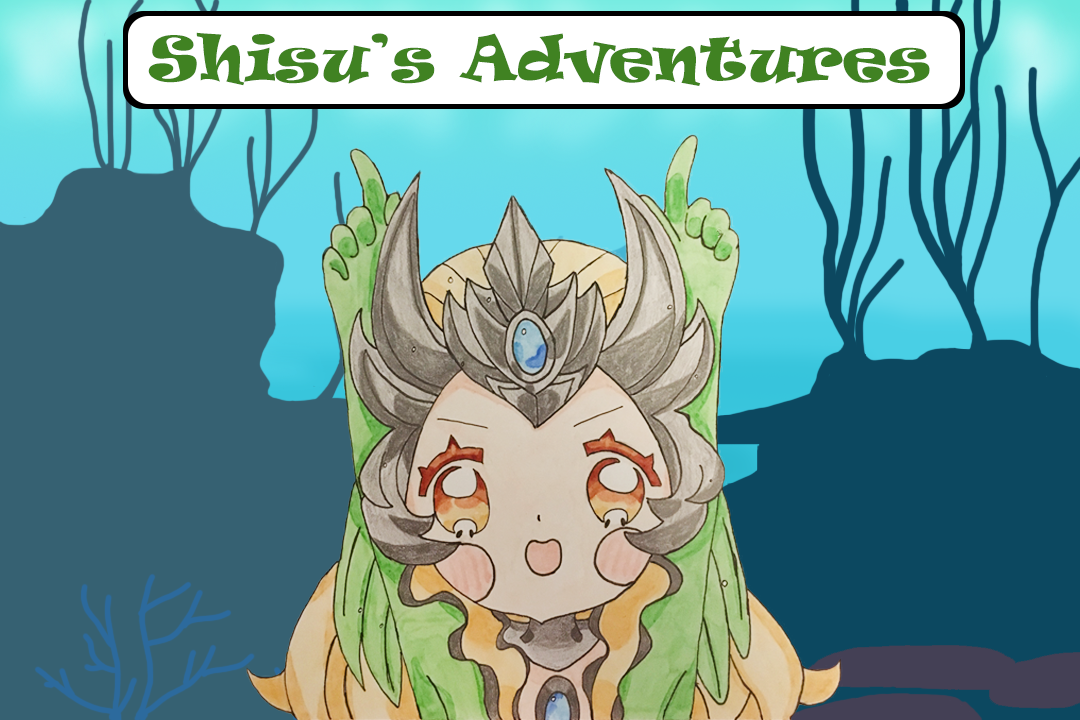
<style>
.page{position:relative;width:1080px;height:720px}
.page>*{position:absolute;margin:0}
.t1{font:58.2px "Ravie";letter-spacing:0.01em;color:#408222;scale:1.03 1}
</style>
<div class="page">
<p class="t1" style="left:148px;top:32px;width:782px;height:54px">Shisu’s Adventures</p>
</div>
